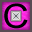
<style>
.page{position:relative;width:32px;height:32px;background:#594b53}
.page>*{position:absolute;margin:0}
.t1{font:33.9px "ArialMT";color:#000000;scale:1.09 1}
</style>
<div class="page">
<p class="t1" style="left:4px;top:3px;width:24px;height:26px">C</p>
</div>
